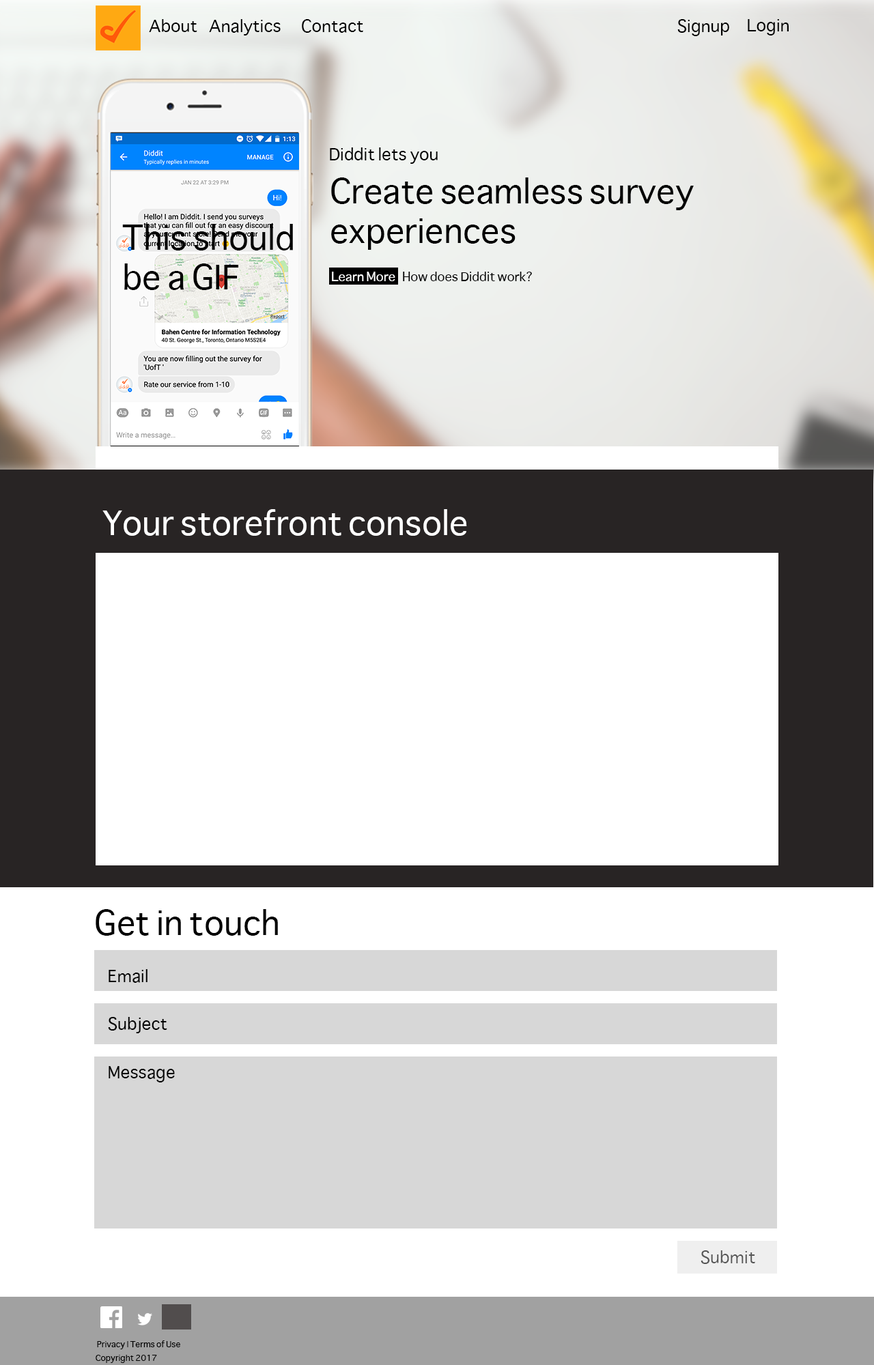
<style>
.page{position:relative;width:874px;height:1365px;background:#ffffff}
.page>*{position:absolute;margin:0}
.t1{font:16.4px "Sathu";color:#000000}
.t2{font:32.8px "Sathu";color:#000000}
.t3{font:12.3px "Sathu";color:#ffffff}
.t4{font:12.3px "Sathu";color:#000000}
.t5{font:32.8px "Sathu";color:#ffffff}
.t6{font:16.4px "Sathu";color:#565656}
.t7{font:8.2px "Sathu";color:#000000}
</style>
<div class="page">
<p class="t1" style="left:149px;top:19px;width:48px;height:13px">About</p>
<p class="t1" style="left:209px;top:19px;width:72px;height:16px">Analytics</p>
<p class="t1" style="left:302px;top:19px;width:61px;height:14px">Contact</p>
<p class="t1" style="left:677px;top:19px;width:52px;height:17px">Signup</p>
<p class="t1" style="left:747px;top:19px;width:41px;height:16px">Login</p>
<p class="t1" style="left:330px;top:147px;width:107px;height:17px">Diddit lets you</p>
<p class="t2" style="left:331px;top:177px;width:362px;height:73px">Create seamless survey<br>experiences</p>
<p class="t2" style="left:122px;top:224px;width:171px;height:66px">This should<br>be a GIF</p>
<p class="t3" style="left:332px;top:272px;width:63px;height:9px">Learn More</p>
<p class="t4" style="left:403px;top:272px;width:129px;height:9px">How does Diddit work?</p>
<p class="t5" style="left:102px;top:509px;width:365px;height:27px">Your storefront console</p>
<p class="t2" style="left:96px;top:909px;width:182px;height:27px">Get in touch</p>
<p class="t1" style="left:109px;top:969px;width:38px;height:14px">Email</p>
<p class="t1" style="left:108px;top:1017px;width:59px;height:16px">Subject</p>
<p class="t1" style="left:109px;top:1066px;width:66px;height:16px">Message</p>
<p class="t6" style="left:700px;top:1250px;width:55px;height:14px">Submit</p>
<p class="t7" style="left:97px;top:1340px;width:83px;height:9px">Privacy | Terms of Use</p>
<p class="t7" style="left:96px;top:1355px;width:61px;height:8px">Copyright 2017</p>
</div>
